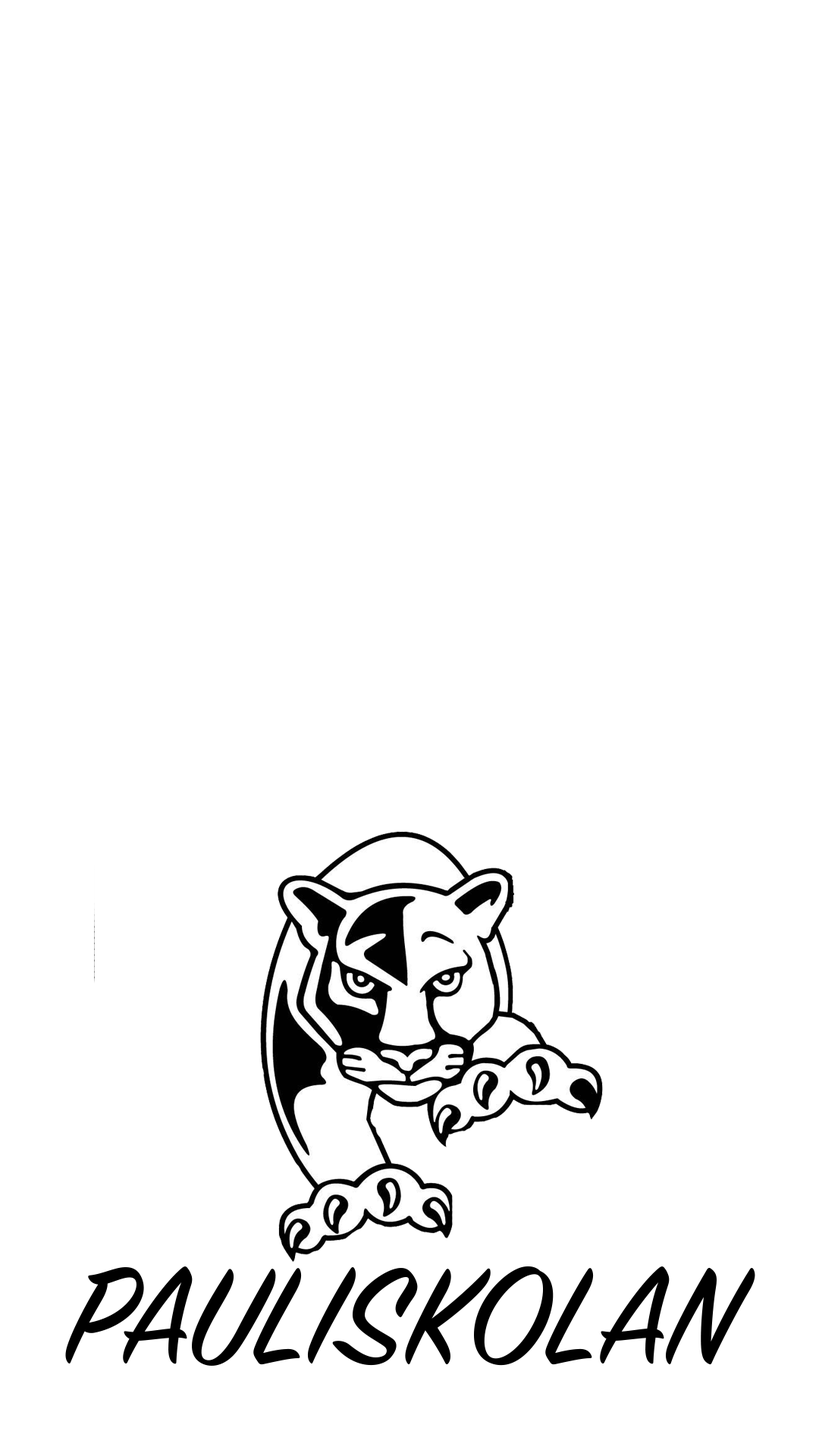
<style>
.page{position:relative;width:819px;height:1456px;background:#ffffff}
.page>*{position:absolute;margin:0}
.t1{font:151.7px "SignPainter-HouseScript";letter-spacing:0.01em;color:#000000;text-transform:uppercase}
</style>
<div class="page">
<p class="t1" style="left:65px;top:1266px;width:690px;height:100px">PAULISKOLAN</p>
</div>
